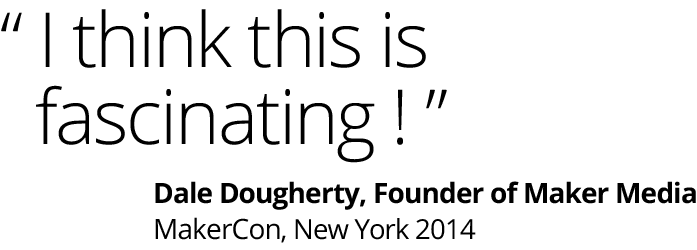
<style>
.page{position:relative;width:697px;height:250px;background:#ffffff}
.page>*{position:absolute;margin:0}
.t1{font:76px/77.2px "OpenSans-Light";letter-spacing:-0.03em;color:#000000}
.t2{font:28.1px/36px "OpenSans-Bold";letter-spacing:-0.03em;color:#000000}
.t3{font:28.1px/36px "OpenSans";letter-spacing:-0.03em;color:#000000}
.t4{font:27.6px/36px "OpenSans";letter-spacing:-0.03em;color:#000000}
</style>
<div class="page">
<p class="t1" style="left:1px;top:9px;width:446px;height:154px">“ I think this is <br>  fascinating ! ”</p>
<p class="t2" style="left:155px;top:181px;width:541px;height:62px">Dale Dougherty, Founder of Maker Media<br><span class="t3">MakerCon</span><span class="t4">, New York 2014</span></p>
</div>
